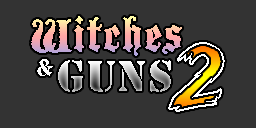
<style>
.page{position:relative;width:256px;height:128px;background:#333333}
.page>*{position:absolute;margin:0}
.t1{font:50px "BlackwoodCastle";letter-spacing:0.025em}
.t2{font:100px "BrasblusHighlight";letter-spacing:0.025em;color:#ffffff}
.t3{font:25px "BlackwoodCastle";letter-spacing:0.025em;color:#ffffff}
.t4{font:40px "StencilStd";letter-spacing:0.025em}
</style>
<div class="page">
<p class="t1" style="left:31px;top:16px;width:151px;height:40px">Witches</p>
<p class="t2" style="left:168px;top:42px;width:57px;height:70px">2</p>
<p class="t3" style="left:37px;top:59px;width:16px;height:17px">&amp;</p>
<p class="t4" style="left:58px;top:60px;width:113px;height:32px">Guns</p>
</div>
